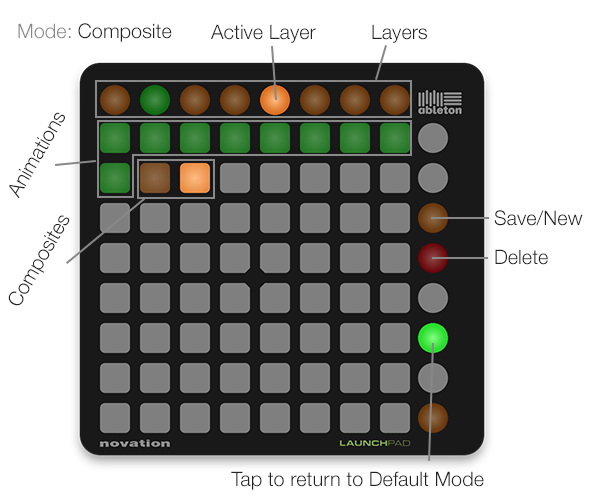
<style>
.page{position:relative;width:600px;height:500px;background:#ffffff}
.page>*{position:absolute;margin:0}
.t1{font:20px "HelveticaNeue-Light";color:#222222}
.t2{font:20px "HelveticaNeue-Light";color:#888888}
.t3{font:20.1px "HelveticaNeue-Light";color:#222222}
</style>
<div class="page">
<p class="t1" style="left:18px;top:23px;width:154px;height:19px"><span class="t2">Mode:</span> Composite</p>
<p class="t1" style="left:211px;top:24px;width:105px;height:19px">Active Layer</p>
<p class="t1" style="left:372px;top:24px;width:55px;height:19px">Layers</p>
<p class="t3" style="left:9px;top:112px;width:56px;height:87px;rotate:-60deg">Animations</p>
<p class="t3" style="left:8px;top:215px;width:62px;height:91px;rotate:-60deg">Composites</p>
<p class="t1" style="left:494px;top:210px;width:89px;height:16px">Save/New</p>
<p class="t1" style="left:495px;top:249px;width:53px;height:16px">Delete</p>
<p class="t1" style="left:231px;top:471px;width:253px;height:19px">Tap to return to Default Mode</p>
</div>
